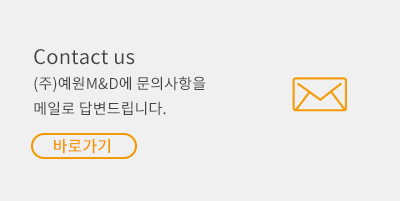
<style>
.page{position:relative;width:400px;height:201px;background:#f0f0f0}
.page>*{position:absolute;margin:0}
.t1{font:15px/25px "NotoSansCJKkr-Regular";letter-spacing:0.01em;color:#434343}
.t2{font:20px/35.5px "NotoSansCJKkr-Regular";letter-spacing:0.01em;color:#434343}
.t3{font:16px "NotoSansCJKkr-Medium";letter-spacing:0.01em;color:#f39800}
</style>
<div class="page">
<p class="t1" style="left:34px;top:49px;width:172px;height:66px"><span class="t2">Contact us<br></span>(주)예원M&amp;D에 문의사항을 메일로 답변드립니다.</p>
<p class="t3" style="left:54px;top:138px;width:56px;height:16px">바로가기</p>
</div>
